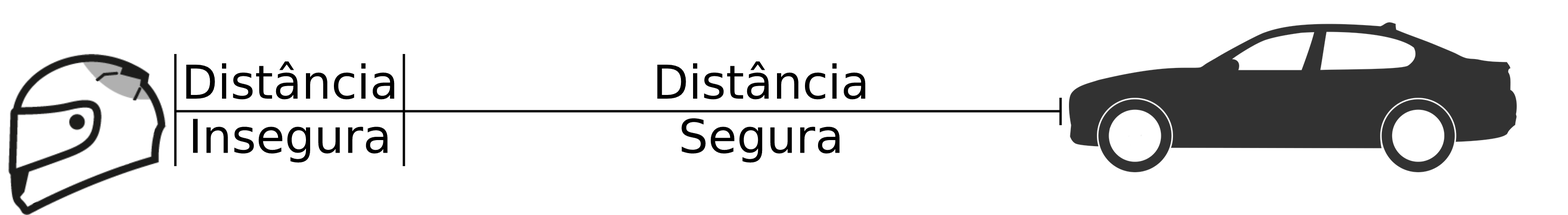
<style>
.page{position:relative;width:1568px;height:215px;background:#ffffff}
.page>*{position:absolute;margin:0}
.t1{font:46.6px "DejaVuSans";color:#000000}
</style>
<div class="page">
<p class="t1" style="left:186px;top:62px;width:209px;height:101px;text-align:center">Distância<br>Insegura</p>
<p class="t1" style="left:657px;top:62px;width:209px;height:101px;text-align:center">Distância<br>Segura</p>
</div>
